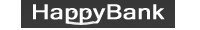
<style>
.page{position:relative;width:200px;height:30px;background:#ffffff}
.page>*{position:absolute;margin:0}
.t1{font:20px "Kartika";letter-spacing:-0.005em;color:#fefeff;font-weight:bold;scale:1.2 1}
</style>
<div class="page">
<p class="t1" style="left:33px;top:4px;width:132px;height:20px">HappyBank</p>
</div>
